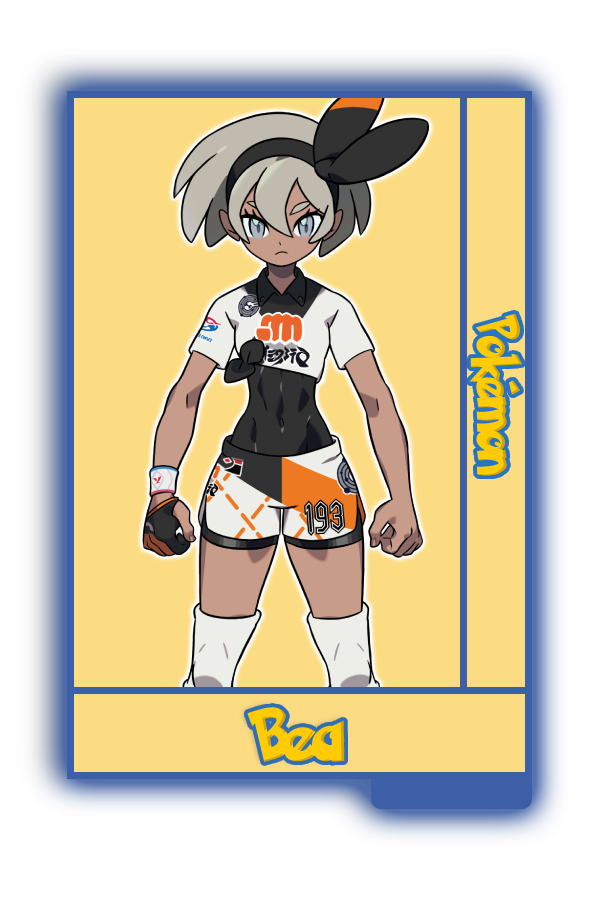
<style>
.page{position:relative;width:600px;height:900px;background:#fbdc83}
.page>*{position:absolute;margin:0}
.t1{font:48.8px "PokemonSolidNormal";color:#ffcb05;scale:0.8 1}
.t2{font:60.1px "PokemonSolidNormal";color:#ffcb05;scale:0.96 1}
</style>
<div class="page">
<p class="t1" style="left:469px;top:313px;width:54px;height:163px;rotate:90deg">Pokémon</p>
<p class="t2" style="left:247px;top:707px;width:98px;height:55px">Bea</p>
</div>
